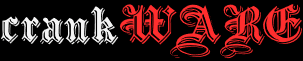
<style>
.page{position:relative;width:303px;height:61px;background:#000000}
.page>*{position:absolute;margin:0}
.t1{font:42px "EmbossedBlackWide-Normal";color:#f5f5f5}
.t2{font:42px "EmbossedBlackWide-Normal";color:#ff2e2e}
</style>
<div class="page">
<p class="t1" style="left:0px;top:4px;width:302px;height:55px">crank<span class="t2">WARE</span></p>
</div>
